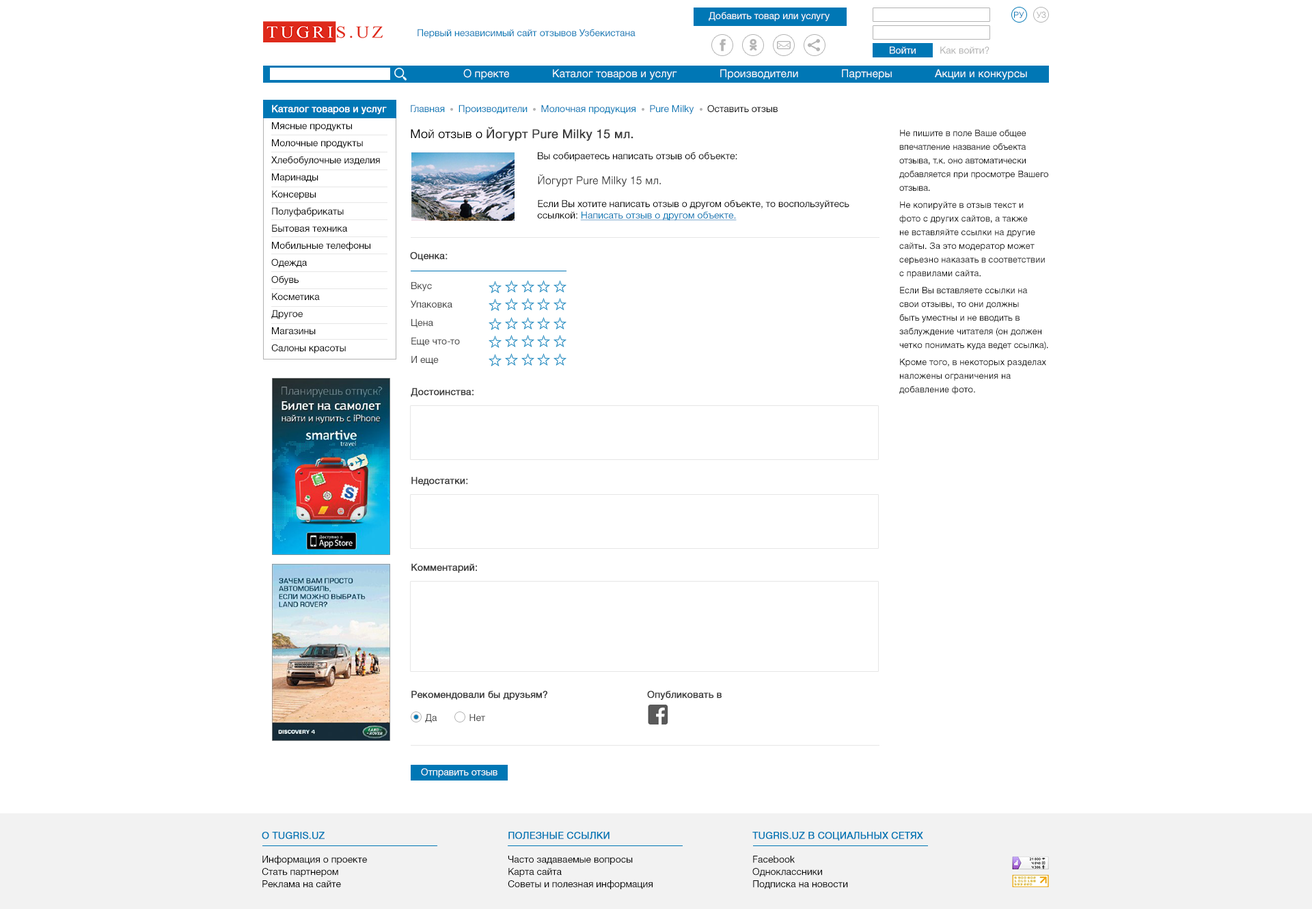
<style>
.page{position:relative;width:1312px;height:909px;background:#ffffff}
.page>*{position:absolute;margin:0}
.t1{font:9.6px "HelveticaNeueCyr-Roman";color:#ffffff}
.t2{font:8.2px "ArialMT";color:#0077b5;text-transform:uppercase}
.t3{font:8.2px "ArialMT";color:#b3b3b3;text-transform:uppercase}
.t4{font:9.6px "HelveticaNeueCyr-Roman";color:#0077b5}
.t5{font:9.6px "HelveticaNeueCyr-Roman";color:#b3b3b3}
.t6{font:10.9px "HelveticaNeueCyr-Roman";color:#ffffff}
.t7{font:9.6px/13.7px "HelveticaNeueCyr-Roman";color:#000000}
.t8{font:9.6px/13.7px "HelveticaNeueCyr-Roman";color:#ffffff;font-weight:bold}
.t9{font:9.6px "HelveticaNeueCyr-Roman";color:#000000}
.t10{font:12.3px "HelveticaNeueCyr-Roman";color:#3d3d3d;font-weight:bold}
.t11{font:12.3px "HelveticaNeueCyr-Roman";color:#000000}
.t12{font:8.9px/13.7px "HelveticaNeueCyr-Roman";color:#000000}
.t13{font:10.9px "HelveticaNeueCyr-Roman";color:#3d3d3d}
.t14{font:9.6px "HelveticaNeueCyr-Roman";color:#0077b5;text-decoration:underline}
.t15{font:9.6px "HelveticaNeueCyr-Roman";color:#3d3d3d;font-weight:bold}
.t16{font:9.6px/15px "HelveticaNeueCyr-Roman";color:#3d3d3d}
.t17{font:9.6px "HelveticaNeueCyr-Roman";color:#3d3d3d}
.t18{font:9.6px/12.3px "HelveticaNeueCyr-Roman";color:#000000}
.t19{font:9.6px "HelveticaNeueCyr-Roman";color:#0077b5;text-transform:uppercase;font-weight:bold}
</style>
<div class="page">
<p class="t1" style="left:709px;top:12px;width:121px;height:9px">Добавить товар или услугу</p>
<p class="t2" style="left:1014px;top:12px;width:10px;height:6px">ру</p>
<p class="t3" style="left:1037px;top:12px;width:9px;height:6px">уз</p>
<p class="t4" style="left:418px;top:29px;width:218px;height:9px">Первый независимый сайт отзывов Узбекистана</p>
<p class="t1" style="left:890px;top:46px;width:26px;height:8px">Войти</p>
<p class="t5" style="left:940px;top:46px;width:49px;height:8px">Как войти?</p>
<p class="t6" style="left:463px;top:69px;width:564px;height:11px">О пректе              Каталог товаров и услуг              Производители              Партнеры              Акции и конкурсы</p>
<p class="t7" style="left:271px;top:105px;width:116px;height:248px"><span class="t8">Каталог товаров и услуг<br></span>Мясные продукты<br>Молочные продукты<br>Хлебобулочные изделия<br>Маринады<br>Консервы<br>Полуфабрикаты<br>Бытовая техника<br>Мобильные телефоны<br>Одежда<br>Обувь<br>Косметика<br>Другое<br>Магазины<br>Салоны красоты</p>
<p class="t4" style="left:411px;top:105px;width:367px;height:9px">Главная     Производители     Молочная продукция     Pure Milky  <span class="t9">   Оставить отзыв</span></p>
<p class="t10" style="left:411px;top:126px;width:222px;height:15px"><span class="t11">Мой отзыв о </span>Йогурт Pure Milky 15 мл.</p>
<p class="t12" style="left:899px;top:129px;width:149px;height:265px">Не пишите в поле Ваше общее впечатление название объекта отзыва, т.к. оно автоматически добавляется при просмотре Вашего отзыва.<br>Не копируйте в отзыв текст и фото с других сайтов, а также не вставляйте ссылки на другие сайты. За это модератор может серьезно наказать в соответствии с правилами сайта.<br>Если Вы вставляете ссылки на свои отзывы, то они должны быть уместны и не вводить в заблуждение читателя (он должен четко понимать куда ведет ссылка).<br>Кроме того, в некоторых разделах наложены ограничения на добавление фото.</p>
<p class="t9" style="left:538px;top:152px;width:199px;height:9px">Вы собираетесь написать отзыв об объекте:</p>
<p class="t9" style="left:537px;top:174px;width:312px;height:47px"><span class="t13">Йогурт Pure Milky 15 мл.<br></span><br>Если Вы хотите написать отзыв о другом объекте, то воспользуйтесь ссылкой: <span class="t14">Написать отзыв о другом объекте.</span></p>
<p class="t15" style="left:410px;top:251px;width:38px;height:10px">Оценка:</p>
<p class="t16" style="left:411px;top:282px;width:49px;height:83px">Вкус<br>Упаковка<br>Цена<br>Еще что-то<br>И еще</p>
<p class="t15" style="left:411px;top:387px;width:63px;height:10px">Достоинства:</p>
<p class="t15" style="left:411px;top:476px;width:57px;height:10px">Недостатки:</p>
<p class="t15" style="left:411px;top:563px;width:66px;height:10px">Комментарий:</p>
<p class="t15" style="left:411px;top:690px;width:136px;height:10px">Рекомендовали бы друзьям?</p>
<p class="t15" style="left:647px;top:690px;width:75px;height:10px">Опубликовать в</p>
<p class="t17" style="left:425px;top:713px;width:60px;height:10px">Да            Нет</p>
<p class="t1" style="left:421px;top:768px;width:76px;height:10px">Отправить отзыв</p>
<p class="t18" style="left:262px;top:832px;width:105px;height:56px"><span class="t19">О Tugris.uz<br><br></span>Информация о проекте<br>Стать партнером<br>Реклама на сайте</p>
<p class="t18" style="left:508px;top:832px;width:145px;height:57px"><span class="t19">Полезные ссылки<br><br></span>Часто задаваемые вопросы<br>Карта сайта<br>Советы и полезная информация</p>
<p class="t18" style="left:752px;top:832px;width:171px;height:57px"><span class="t19">Tugris.uz в социальных сетях<br><br></span>Facebook<br>Одноклассники<br>Подписка на новости</p>
</div>
